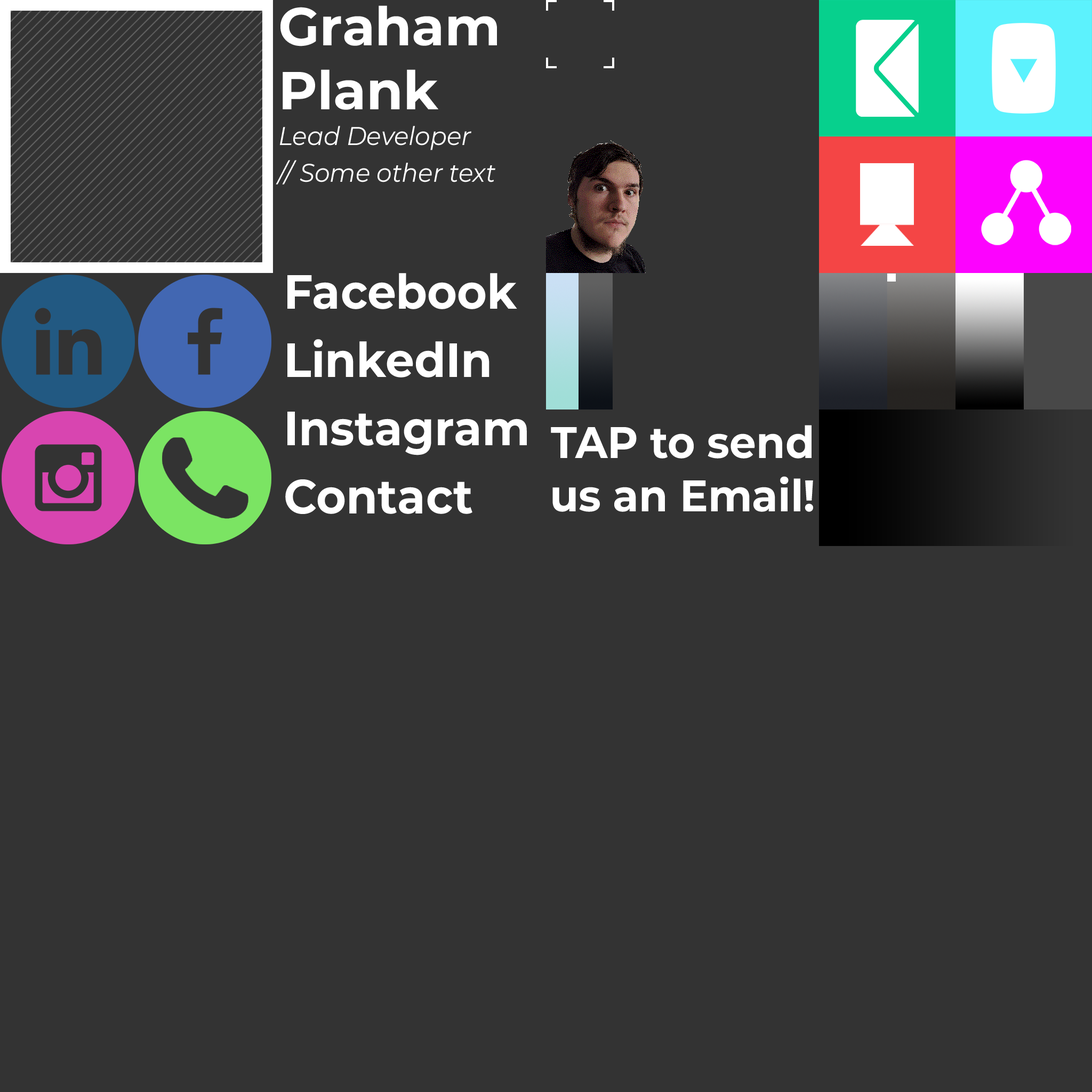
<style>
.page{position:relative;width:1092px;height:1092px;background:#333333}
.page>*{position:absolute;margin:0}
.t1{font:53.3px "Montserrat-Bold";color:#ffffff}
.t2{font:25.6px "Montserrat-Italic";color:#ffffff;scale:0.95 1}
.t3{font:48px "Montserrat-Bold";color:#ffffff;scale:0.95 1}
.t4{font:44.3px "Montserrat-Bold";color:#ffffff;scale:0.95 1}
</style>
<div class="page">
<p class="t1" style="left:280px;top:5px;width:217px;height:105px">Graham<br>Plank</p>
<p class="t2" style="left:279px;top:126px;width:192px;height:24px">Lead Developer</p>
<p class="t2" style="left:276px;top:160px;width:219px;height:24px">// Some other text</p>
<p class="t3" style="left:287px;top:273px;width:230px;height:36px">Facebook</p>
<p class="t3" style="left:287px;top:339px;width:202px;height:39px">LinkedIn</p>
<p class="t3" style="left:287px;top:412px;width:240px;height:43px">Instagram</p>
<p class="t4" style="left:551px;top:425px;width:262px;height:87px;text-align:center">TAP to send us an Email!</p>
<p class="t3" style="left:285px;top:479px;width:187px;height:35px">Contact</p>
</div>
